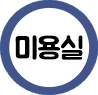
<style>
.page{position:relative;width:98px;height:95px;background:#ffffff}
.page>*{position:absolute;margin:0}
.t1{font:30px "BMJUA";color:#000000}
</style>
<div class="page">
<p class="t1" style="left:15px;top:35px;width:68px;height:25px">미용실</p>
</div>
